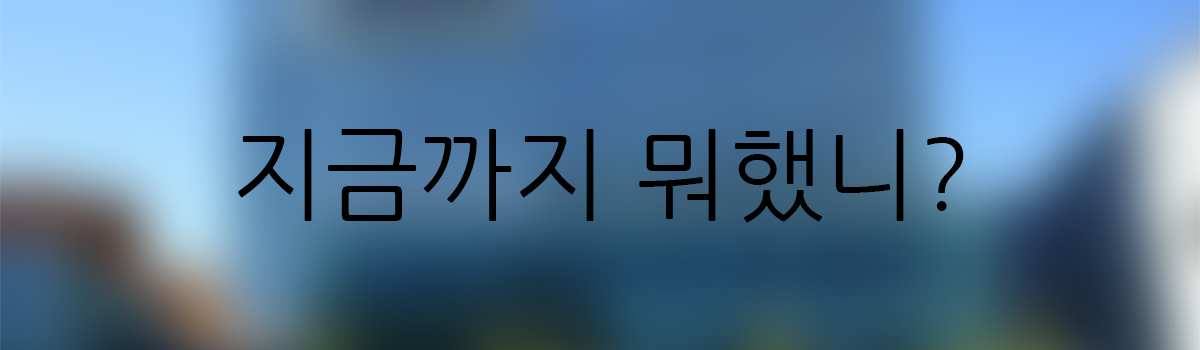
<style>
.page{position:relative;width:1200px;height:350px}
.page>*{position:absolute;margin:0}
.t1{font:100px "NanumGothic";color:#000000}
</style>
<div class="page">
<p class="t1" style="left:238px;top:129px;width:726px;height:94px">지금까지 뭐했니?</p>
</div>
